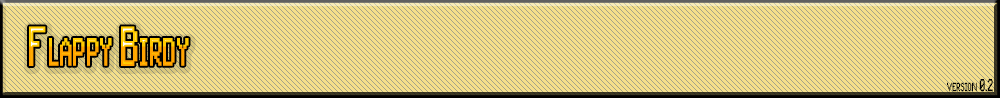
<style>
.page{position:relative;width:1000px;height:98px;background:#f4df8a}
.page>*{position:absolute;margin:0}
.t1{font:77px "Pixel-UniCode";font-variant:small-caps;font-weight:bold;scale:0.62 1}
.t2{font:23.8px "Pixel-UniCode";color:#000000;font-variant:small-caps;font-weight:bold;scale:0.62 1}
</style>
<div class="page">
<p class="t1" style="left:29px;top:26px;width:160px;height:40px">Flappy Birdy</p>
<p class="t2" style="left:947px;top:79px;width:46px;height:13px">version 0.2</p>
</div>
